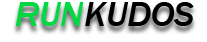
<style>
.page{position:relative;width:207px;height:42px;background:#ffffff}
.page>*{position:absolute;margin:0}
.t1{font:36px "FranklinGothic-MediumItalic";color:#000000}
.t2{font:36px "FranklinGothic-MediumItalic";color:#00d942}
</style>
<div class="page">
<p class="t1" style="left:15px;top:2px;width:179px;height:24px"><span class="t2">RUN</span>KUDOS</p>
</div>
